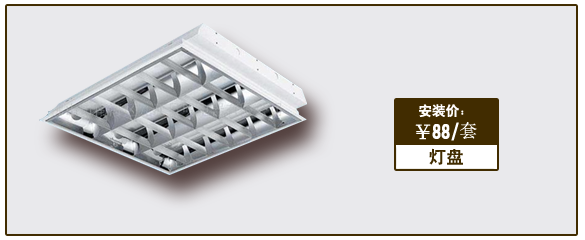
<style>
.page{position:relative;width:585px;height:240px;background:#e9e9ec}
.page>*{position:absolute;margin:0}
.t1{font:13.5px "HeitiCSEG";color:#fffefe}
.t2{font:18.1px "HeitiCSEG";color:#ffffff}
.t3{font:18.1px "SimSun";color:#ffffff}
.t4{font:17.4px "HeitiCSEG";color:#412c00}
</style>
<div class="page">
<p class="t1" style="left:419px;top:104px;width:45px;height:14px">安装价：</p>
<p class="t2" style="left:415px;top:122px;width:62px;height:19px">￥88/<span class="t3">套</span></p>
<p class="t4" style="left:429px;top:148px;width:34px;height:17px">灯盘</p>
</div>
